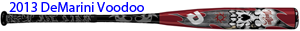
<style>
.page{position:relative;width:300px;height:31px;background:#ffffff}
.page>*{position:absolute;margin:0}
.t1{font:14px "MyriadPro-Regular";color:#0000ff}
</style>
<div class="page">
<p class="t1" style="left:9px;top:2px;width:135px;height:10px">2013 DeMarini Voodoo</p>
</div>
